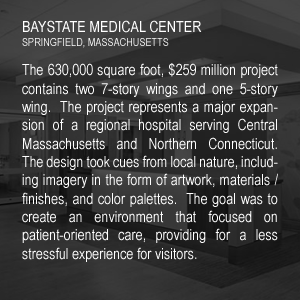
<style>
.page{position:relative;width:300px;height:300px}
.page>*{position:absolute;margin:0}
.t1{font:15.6px "ArialNarrow";color:#ffffff}
.t2{font:11.1px "ArialNarrow"}
.t3{font:15.3px "ArialNarrow";color:#ffffff}
</style>
<div class="page">
<p class="t1" style="left:23px;top:20px;width:179px;height:13px">BAYSTATE MEDICAL CENTER</p>
<p class="t2" style="left:22px;top:38px;width:147px;height:10px">SPRINGFIELD, MASSACHUSETTS</p>
<p class="t3" style="left:22px;top:63px;width:256px;height:199px;text-align:justify">The 630,000 square foot, $259 million project contains two 7-story wings and one 5-story wing.  The project represents a major expansion of a regional hospital serving Central Massachusetts and Northern Connecticut.  The design took cues from local nature, including imagery in the form of artwork, materials / finishes, and color palettes.  The goal was to create an environment that focused on patient-oriented care, providing for a less stressful experience for visitors.</p>
</div>
